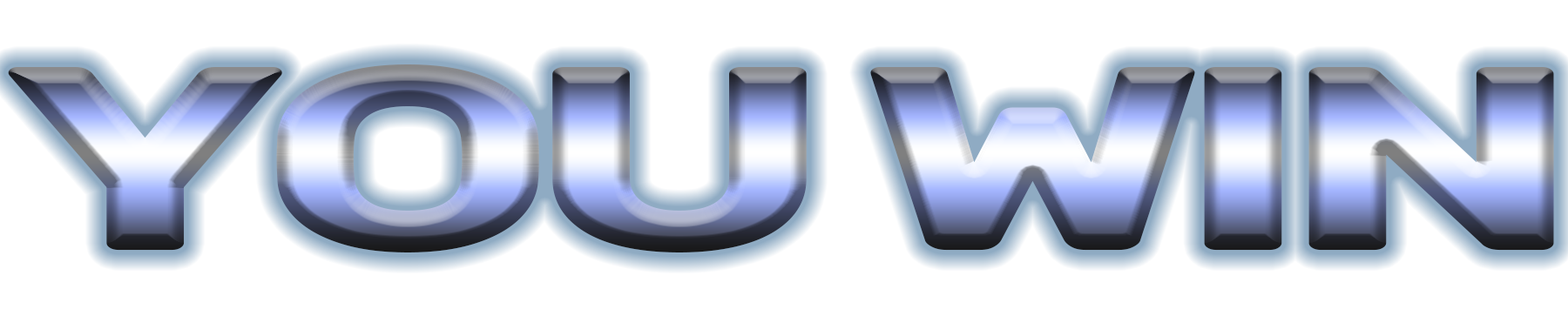
<style>
.page{position:relative;width:1568px;height:316px;background:#ffffff}
.page>*{position:absolute;margin:0}
.t1{font:261.3px "Rubik-Bold";letter-spacing:-0.075em;scale:1.6 1}
</style>
<div class="page">
<p class="t1" style="left:8px;top:64px;width:1546px;height:189px">YOU WIN</p>
</div>
